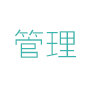
<style>
.page{position:relative;width:90px;height:90px;background:#ffffff}
.page>*{position:absolute;margin:0}
.t1{font:33.3px "FZYXFW--GB1-0";color:#3ab6ae}
.t2{font:20.8px "FZZKFW--GB1-0";color:#3ab6ae}
</style>
<div class="page">
<p class="t1" style="left:15px;top:29px;width:61px;height:29px"><span class="t2"> </span>管理</p>
</div>
